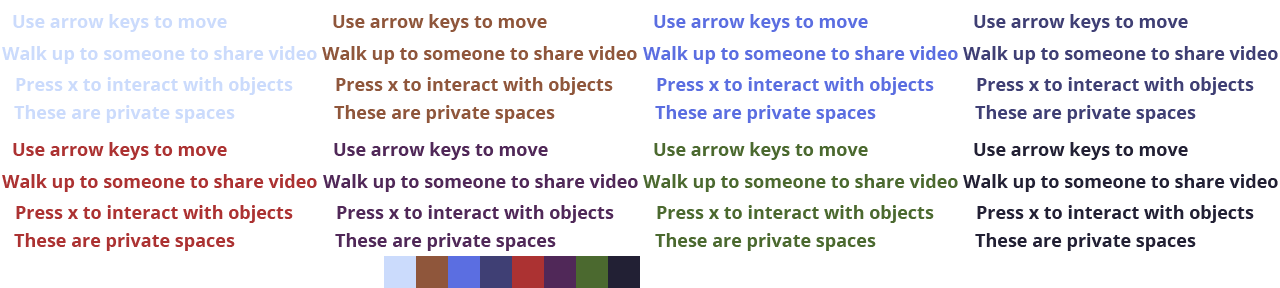
<style>
.page{position:relative;width:1280px;height:288px;background:#ffffff}
.page>*{position:absolute;margin:0}
.t1{font:18px "OpenSans-Bold";color:#cbdbfc}
.t2{font:18px "OpenSans-Bold";color:#8f563b}
.t3{font:18px "OpenSans-Bold";color:#5b6ee1}
.t4{font:18px "OpenSans-Bold";color:#3f3f74}
.t5{font:18px "OpenSans-Bold";color:#ac3232}
.t6{font:18px "OpenSans-Bold";color:#502858}
.t7{font:18px "OpenSans-Bold";color:#4b692f}
.t8{font:18px "OpenSans-Bold";color:#222034}
</style>
<div class="page">
<p class="t1" style="left:13px;top:14px;width:214px;height:18px">Use arrow keys to move</p>
<p class="t2" style="left:333px;top:14px;width:214px;height:18px">Use arrow keys to move</p>
<p class="t3" style="left:654px;top:14px;width:214px;height:18px">Use arrow keys to move</p>
<p class="t4" style="left:974px;top:14px;width:214px;height:18px">Use arrow keys to move</p>
<p class="t1" style="left:2px;top:46px;width:315px;height:18px">Walk up to someone to share video</p>
<p class="t2" style="left:322px;top:46px;width:315px;height:18px">Walk up to someone to share video</p>
<p class="t3" style="left:643px;top:46px;width:315px;height:18px">Walk up to someone to share video</p>
<p class="t4" style="left:963px;top:46px;width:315px;height:18px">Walk up to someone to share video</p>
<p class="t1" style="left:16px;top:77px;width:277px;height:18px">Press x to interact with objects</p>
<p class="t2" style="left:336px;top:77px;width:277px;height:18px">Press x to interact with objects</p>
<p class="t3" style="left:657px;top:77px;width:277px;height:18px">Press x to interact with objects</p>
<p class="t4" style="left:977px;top:77px;width:277px;height:18px">Press x to interact with objects</p>
<p class="t1" style="left:14px;top:105px;width:221px;height:18px">These are private spaces</p>
<p class="t2" style="left:334px;top:105px;width:221px;height:18px">These are private spaces</p>
<p class="t3" style="left:655px;top:105px;width:221px;height:18px">These are private spaces</p>
<p class="t4" style="left:975px;top:105px;width:221px;height:18px">These are private spaces</p>
<p class="t5" style="left:13px;top:142px;width:214px;height:18px">Use arrow keys to move</p>
<p class="t6" style="left:334px;top:142px;width:214px;height:18px">Use arrow keys to move</p>
<p class="t7" style="left:654px;top:142px;width:214px;height:18px">Use arrow keys to move</p>
<p class="t8" style="left:974px;top:142px;width:214px;height:18px">Use arrow keys to move</p>
<p class="t5" style="left:2px;top:174px;width:315px;height:18px">Walk up to someone to share video</p>
<p class="t6" style="left:323px;top:174px;width:315px;height:18px">Walk up to someone to share video</p>
<p class="t7" style="left:643px;top:174px;width:315px;height:18px">Walk up to someone to share video</p>
<p class="t8" style="left:963px;top:174px;width:315px;height:18px">Walk up to someone to share video</p>
<p class="t5" style="left:16px;top:205px;width:277px;height:18px">Press x to interact with objects</p>
<p class="t6" style="left:337px;top:205px;width:277px;height:18px">Press x to interact with objects</p>
<p class="t7" style="left:657px;top:205px;width:277px;height:18px">Press x to interact with objects</p>
<p class="t8" style="left:977px;top:205px;width:277px;height:18px">Press x to interact with objects</p>
<p class="t5" style="left:14px;top:233px;width:221px;height:18px">These are private spaces</p>
<p class="t6" style="left:335px;top:233px;width:221px;height:18px">These are private spaces</p>
<p class="t7" style="left:655px;top:233px;width:221px;height:18px">These are private spaces</p>
<p class="t8" style="left:975px;top:233px;width:221px;height:18px">These are private spaces</p>
</div>
